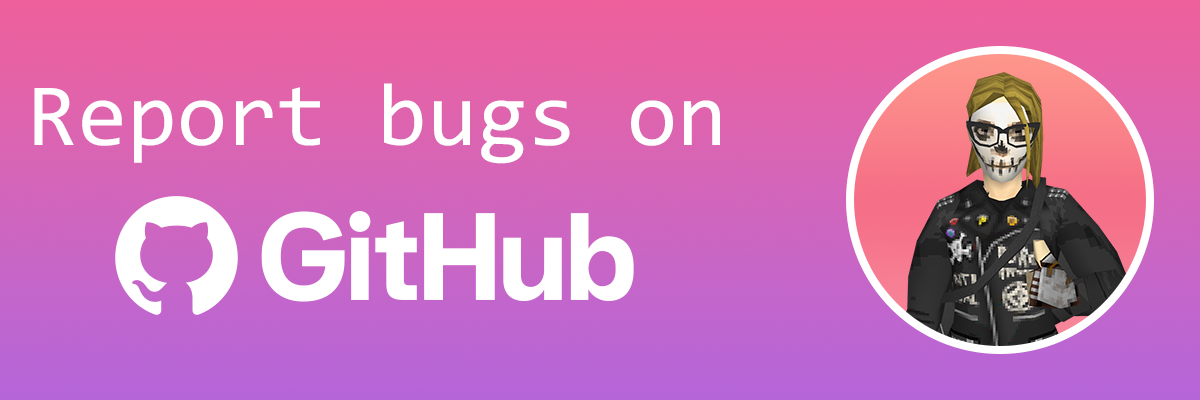
<style>
.page{position:relative;width:1200px;height:400px}
.page>*{position:absolute;margin:0}
.t1{font:89.2px "Consolas";color:#ffffff}
</style>
<div class="page">
<p class="t1" style="left:34px;top:83px;width:686px;height:81px">Report bugs on</p>
</div>
